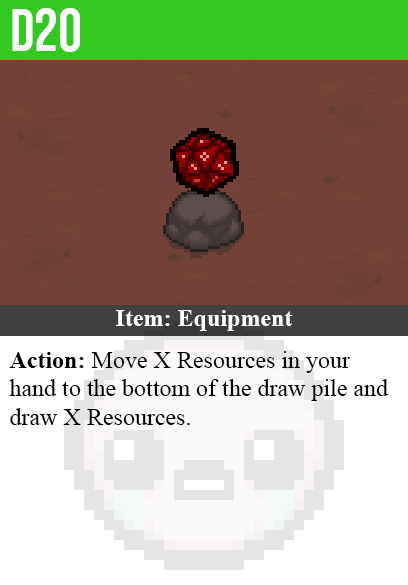
<style>
.page{position:relative;width:408px;height:585px;background:#734136}
.page>*{position:absolute;margin:0}
.t1{font:60px "BebasNeue-Regular";color:#ffffff}
.t2{font:24px "TimesNewRomanPS-BoldMT";color:#ffffff}
.t3{font:24px "TimesNewRomanPSMT";color:#000000}
.t4{font:24px "TimesNewRomanPS-BoldMT";color:#000000}
</style>
<div class="page">
<p class="t1" style="left:12px;top:8px;width:68px;height:44px">d20</p>
<p class="t2" style="left:116px;top:310px;width:177px;height:21px">Item: Equipment</p>
<p class="t3" style="left:9px;top:351px;width:379px;height:74px"><span class="t4">Action:</span> Move X Resources in your<br>hand to the bottom of the draw pile and<br>draw X Resources.</p>
</div>
